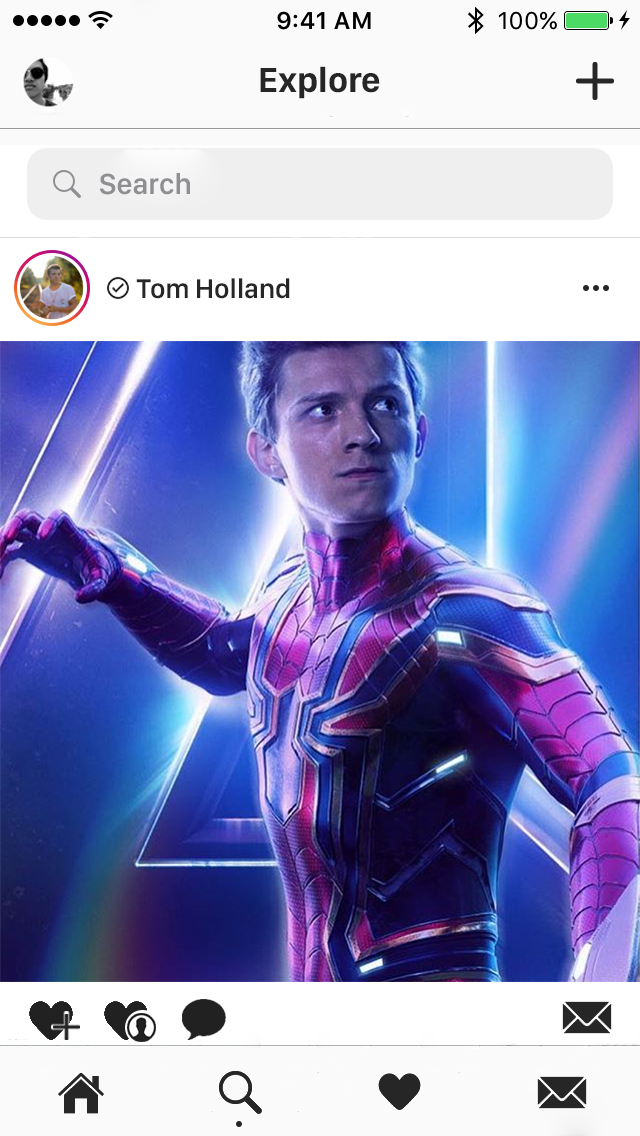
<style>
.page{position:relative;width:640px;height:1136px}
.page>*{position:absolute;margin:0}
.t1{font:36px "SanFranciscoDisplay-Bold";color:#262626}
.t2{font:30px "SanFranciscoDisplay-Semibold";color:#8e8e93}
.t3{font:28px "SanFranciscoDisplay-Semibold";color:#262626}
</style>
<div class="page">
<p class="t1" style="left:260px;top:66px;width:120px;height:33px">Explore</p>
<p class="t2" style="left:100px;top:173px;width:90px;height:22px">Search</p>
<p class="t3" style="left:136px;top:278px;width:154px;height:21px">Tom Holland</p>
</div>
